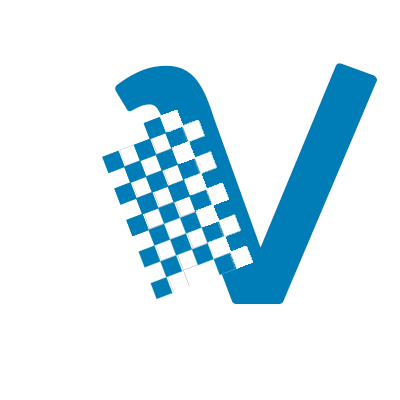
<style>
.page{position:relative;width:400px;height:400px;background:#ffffff}
.page>*{position:absolute;margin:0}
.t1{font:508.7px "SteinemUnicode";color:#007db6}
</style>
<div class="page">
<p class="t1" style="left:115px;top:63px;width:263px;height:241px">v</p>
</div>
